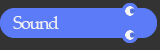
<style>
.page{position:relative;width:160px;height:50px;background:#5b7bf9}
.page>*{position:absolute;margin:0}
.t1{font:18px "PalatinoLinotype-Roman";letter-spacing:-0.08em;color:#f0f0f0}
</style>
<div class="page">
<p class="t1" style="left:13px;top:16px;width:46px;height:13px">Sound</p>
</div>
